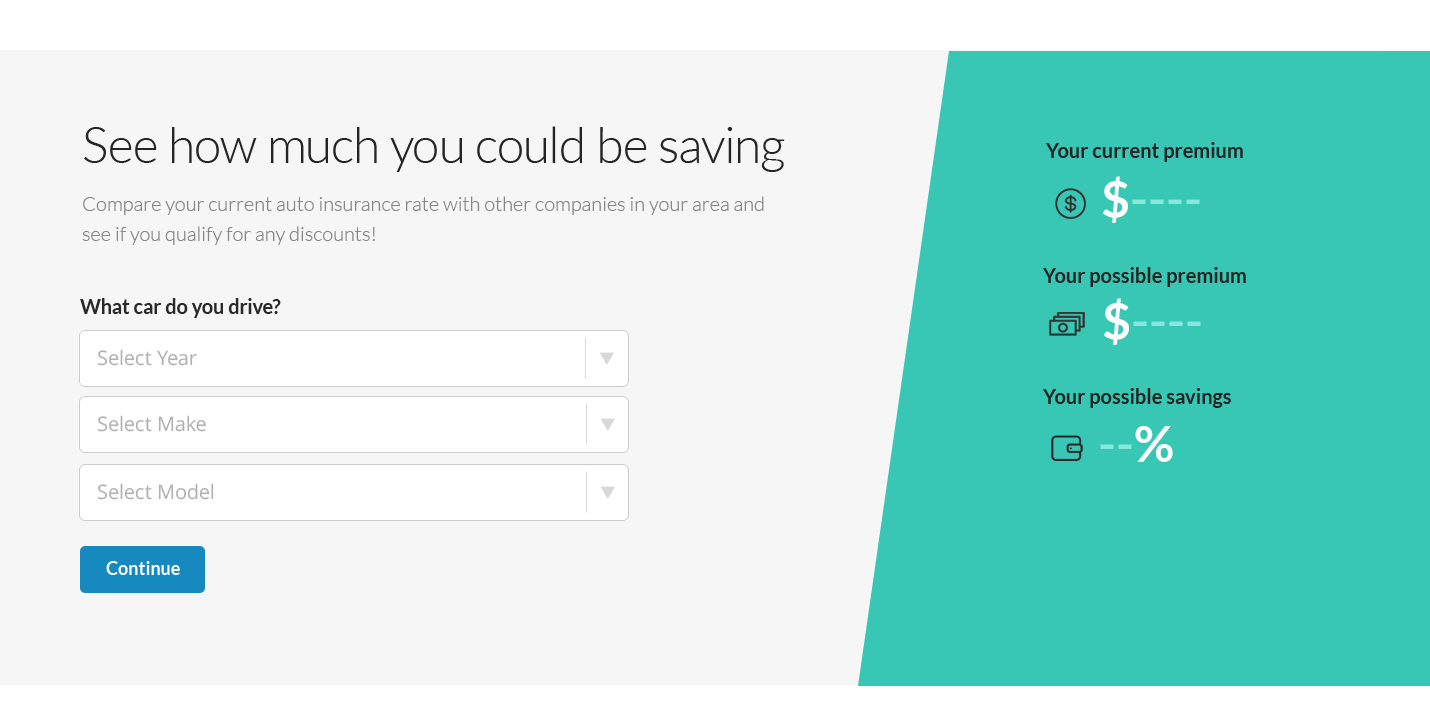
<style>
.page{position:relative;width:1430px;height:726px;background:#f6f6f6}
.page>*{position:absolute;margin:0}
.t1{font:50px "Lato-Light";color:#252525}
.t2{font:20px "Lato-Bold";color:#252525}
.t3{font:50px "Lato-Bold";color:#87e8db}
.t4{font:50px "Lato-Bold";color:#ffffff}
.t5{font:20px/30px "Lato-Light";color:#878787}
.t6{font:20px "Lato-Bold";color:#292929}
.t7{font:20px "OpenSans";color:#b2b1b1}
.t8{font:18px "Lato-Bold";color:#ffffff}
</style>
<div class="page">
<p class="t1" style="left:84px;top:126px;width:701px;height:46px">See how much you could be saving</p>
<p class="t2" style="left:1046px;top:142px;width:197px;height:20px">Your current premium</p>
<p class="t3" style="left:1102px;top:176px;width:98px;height:47px"><span class="t4">$</span>----</p>
<p class="t5" style="left:82px;top:196px;width:682px;height:49px">Compare your current auto insurance rate with other companies in your area and <br>see if you qualify for any discounts!</p>
<p class="t2" style="left:1043px;top:267px;width:203px;height:20px">Your possible premium</p>
<p class="t6" style="left:80px;top:298px;width:201px;height:20px">What car do you drive?</p>
<p class="t3" style="left:1103px;top:298px;width:98px;height:47px"><span class="t4">$</span>----</p>
<p class="t7" style="left:97px;top:349px;width:100px;height:17px">Select Year</p>
<p class="t2" style="left:1043px;top:388px;width:188px;height:20px">Your possible savings</p>
<p class="t7" style="left:97px;top:415px;width:109px;height:17px">Select Make</p>
<p class="t3" style="left:1100px;top:426px;width:73px;height:36px">--<span class="t4">%</span></p>
<p class="t7" style="left:97px;top:483px;width:117px;height:17px">Select Model</p>
<p class="t8" style="left:106px;top:561px;width:74px;height:14px">Continue</p>
</div>
